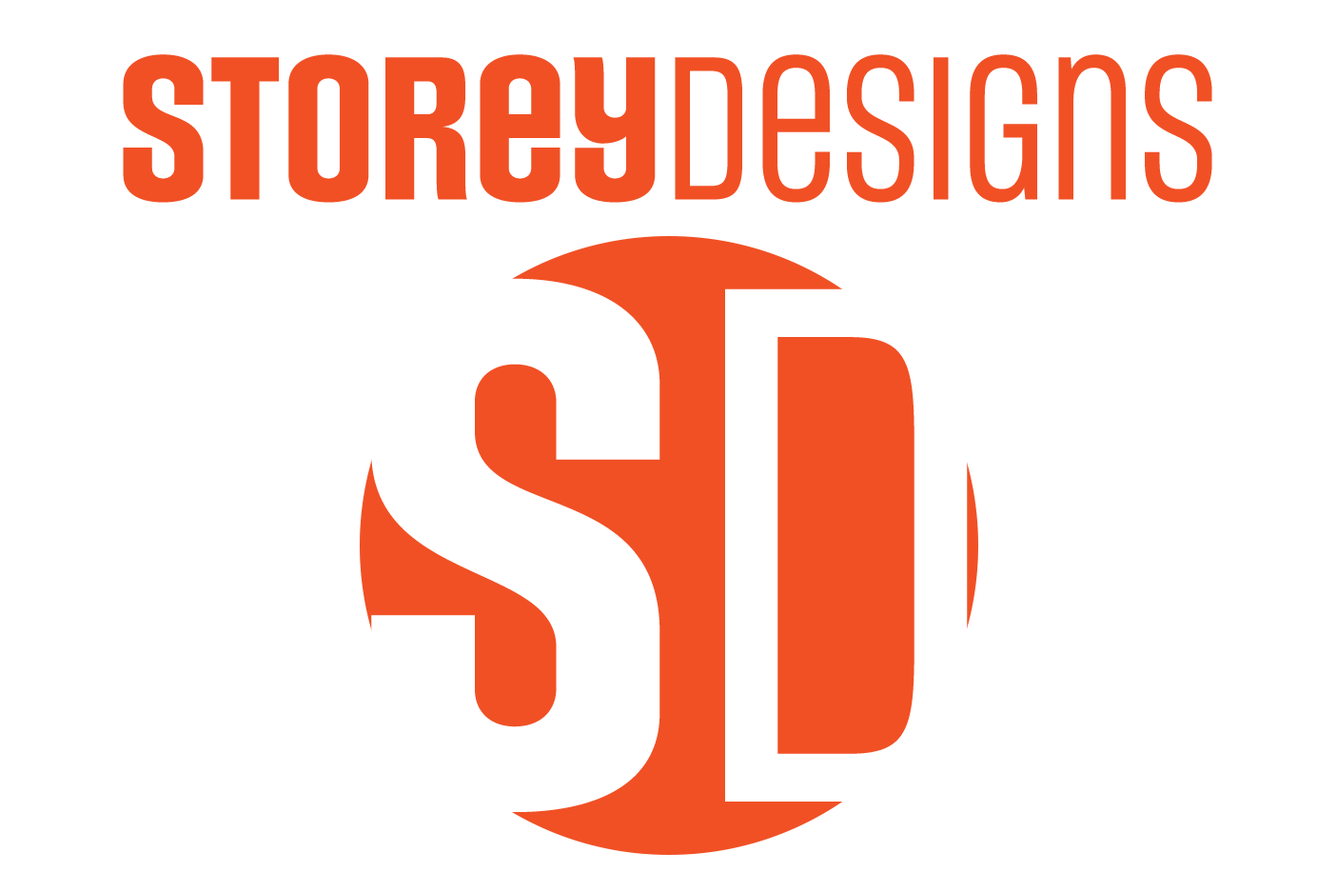
<style>
.page{position:relative;width:1337px;height:892px;background:#ffffff}
.page>*{position:absolute;margin:0}
.t1{font:171.1px "SocialGothic-Regular";color:#f15025}
.t2{font:171.1px "SocialGothic-Bold";color:#f15025}
</style>
<div class="page">
<p class="t1" style="left:123px;top:54px;width:1089px;height:149px"><span class="t2">Storey</span>Designs</p>
</div>
